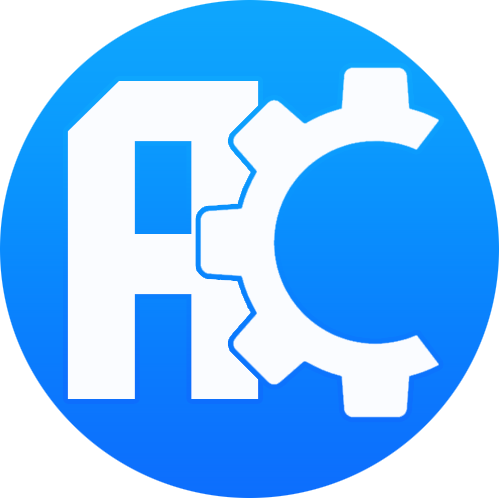
<style>
.page{position:relative;width:500px;height:500px;background:#fafcff}
.page>*{position:absolute;margin:0}
.t1{font:450px "AldotheApache";letter-spacing:0.005em;color:#ffffff}
</style>
<div class="page">
<p class="t1" style="left:67px;top:81px;width:192px;height:318px">a</p>
</div>
